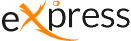
<style>
.page{position:relative;width:131px;height:41px;background:#ffffff}
.page>*{position:absolute;margin:0}
.t1{font:37.5px "Lato-Regular";letter-spacing:-0.02em;color:#1c1c1c}
.t2{font:41.7px "AceRecords";letter-spacing:-0.02em;color:#ff8400}
.t3{font:33.3px "KomikaGlaze";letter-spacing:-0.04em;color:#ff8400;text-transform:uppercase}
</style>
<div class="page">
<p class="t1" style="left:2px;top:0px;width:77px;height:41px">e<span class="t2">X</span></p>
<p class="t3" style="left:53px;top:0px;width:7px;height:6px">.</p>
<p class="t1" style="left:49px;top:8px;width:81px;height:26px">press</p>
</div>
